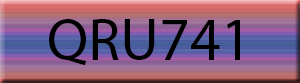
<style>
.page{position:relative;width:300px;height:83px}
.page>*{position:absolute;margin:0}
.t1{font:59.8px "MyriadPro-Regular";color:#000000}
</style>
<div class="page">
<p class="t1" style="left:49px;top:19px;width:191px;height:47px">QRU741</p>
</div>
